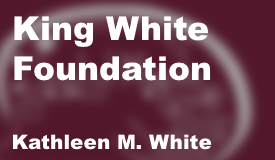
<style>
.page{position:relative;width:275px;height:160px}
.page>*{position:absolute;margin:0}
.t1{font:33px "Arial-Black";color:#ffffff}
.t2{font:20px "Arial-Black";color:#ffffff}
</style>
<div class="page">
<p class="t1" style="left:14px;top:16px;width:197px;height:65px">King White<br>Foundation</p>
<p class="t2" style="left:13px;top:134px;width:199px;height:16px">Kathleen M. White</p>
</div>
